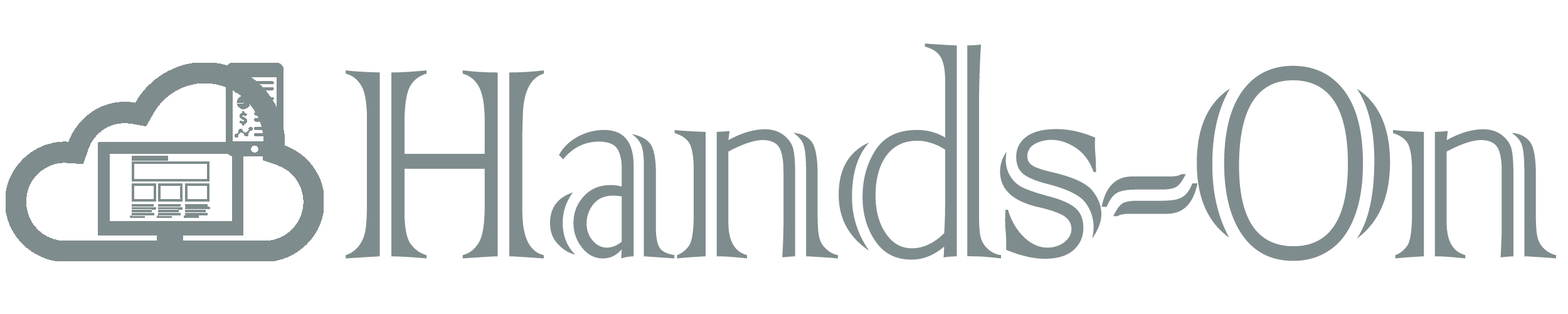
<style>
.page{position:relative;width:1568px;height:314px;background:#ffffff}
.page>*{position:absolute;margin:0}
.t1{font:356.5px "ColonnaMT";letter-spacing:-0.04em;color:#7f8c8d;scale:0.91 1}
</style>
<div class="page">
<p class="t1" style="left:346px;top:43px;width:1210px;height:218px">Hands-On</p>
</div>
